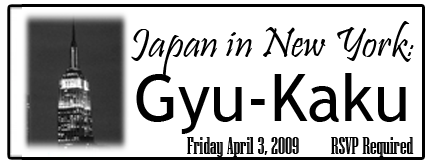
<style>
.page{position:relative;width:432px;height:164px;background:#ffffff}
.page>*{position:absolute;margin:0}
.t1{font:43.3px "Pristina-Regular";color:#000000}
.t2{font:34.6px "Pristina-Regular";color:#000000}
.t3{font:65px "TrebuchetMS";color:#000000}
.t4{font:24px "NiagaraEngraved-Reg";color:#000000}
</style>
<div class="page">
<p class="t1" style="left:131px;top:21px;width:283px;height:55px">Japan in New York<span class="t2">:</span></p>
<p class="t3" style="left:136px;top:73px;width:270px;height:61px">Gyu-Kaku</p>
<p class="t4" style="left:187px;top:137px;width:227px;height:20px">Friday April 3, 2009   RSVP Required</p>
</div>
